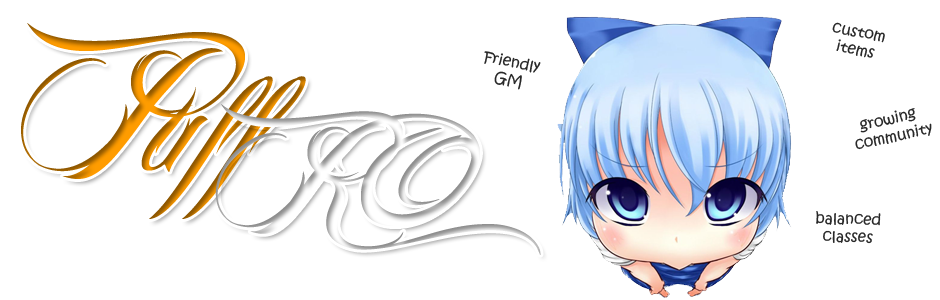
<style>
.page{position:relative;width:940px;height:300px;background:#ffffff}
.page>*{position:absolute;margin:0}
.t1{font:240px "BILLYARGELFONT"}
.t2{font:15px "KristenITC-Regular";color:#282828}
.t3{font:200px "BILLYARGELFONT"}
</style>
<div class="page">
<p class="t1" style="left:21px;top:23px;width:285px;height:196px">Puff</p>
<p class="t2" style="left:832px;top:22px;width:53px;height:36px;text-align:center;rotate:11deg">custom<br>items</p>
<p class="t2" style="left:484px;top:51px;width:57px;height:39px;text-align:center;rotate:11deg">Friendly<br>GM</p>
<p class="t3" style="left:215px;top:104px;width:326px;height:151px">RO</p>
<p class="t2" style="left:855px;top:108px;width:77px;height:42px;text-align:center;rotate:-12deg">growing <br>community</p>
<p class="t2" style="left:816px;top:211px;width:65px;height:33px;text-align:center;rotate:1deg">balanced<br>classes</p>
</div>
